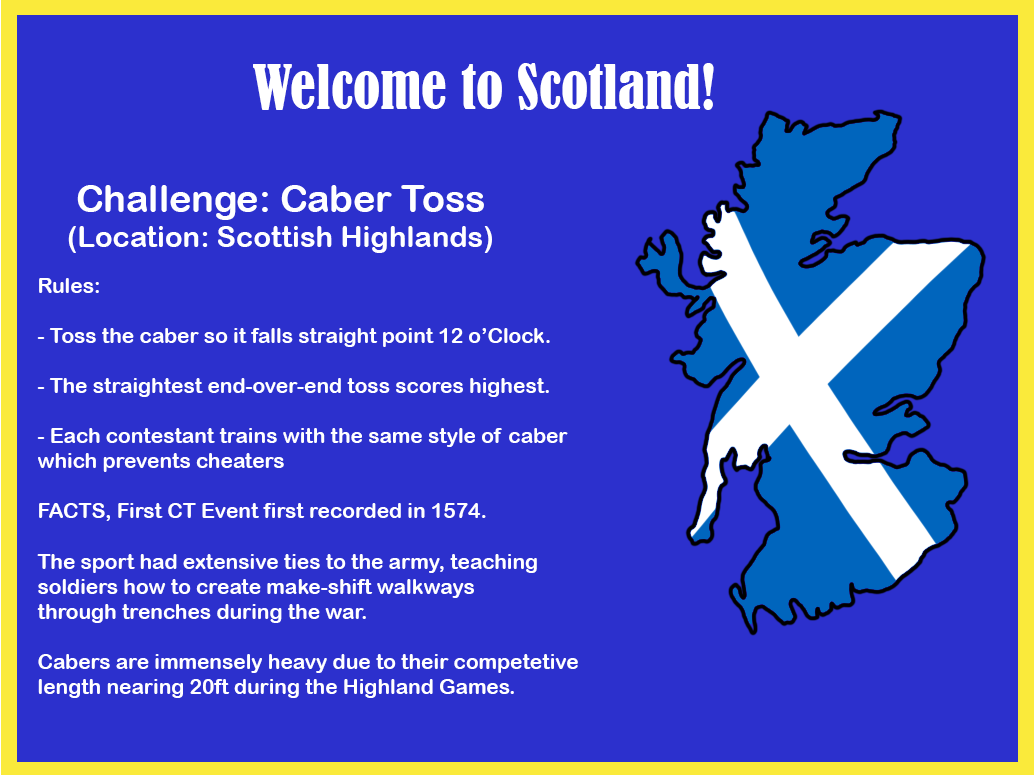
<style>
.page{position:relative;width:1035px;height:775px;background:#2c30cd}
.page>*{position:absolute;margin:0}
.t1{font:56.9px "BernardMT-Condensed";color:#ffffff}
.t2{font:29.2px "ArialRoundedMTBold";color:#ffffff}
.t3{font:37.5px "ArialRoundedMTBold";color:#ffffff}
.t4{font:20.9px "ArialRoundedMTBold";color:#ffffff}
</style>
<div class="page">
<p class="t1" style="left:253px;top:63px;width:461px;height:47px">Welcome to Scotland!</p>
<p class="t2" style="left:68px;top:185px;width:424px;height:68px;text-align:center"><span class="t3">Challenge: Caber Toss<br></span>(Location: Scottish Highlands)</p>
<p class="t4" style="left:37px;top:278px;width:541px;height:420px">Rules:<br><br>- Toss the caber so it falls straight point 12 o’Clock.<br><br>- The straightest end-over-end toss scores highest.<br><br>- Each contestant trains with the same style of caber <br>which prevents cheaters<br><br>FACTS, First CT Event first recorded in 1574.<br><br>The sport had extensive ties to the army, teaching <br>soldiers how to create make-shift walkways <br>through trenches during the war.<br><br>Cabers are immensely heavy due to their competetive <br>length nearing 20ft during the Highland Games.</p>
</div>
